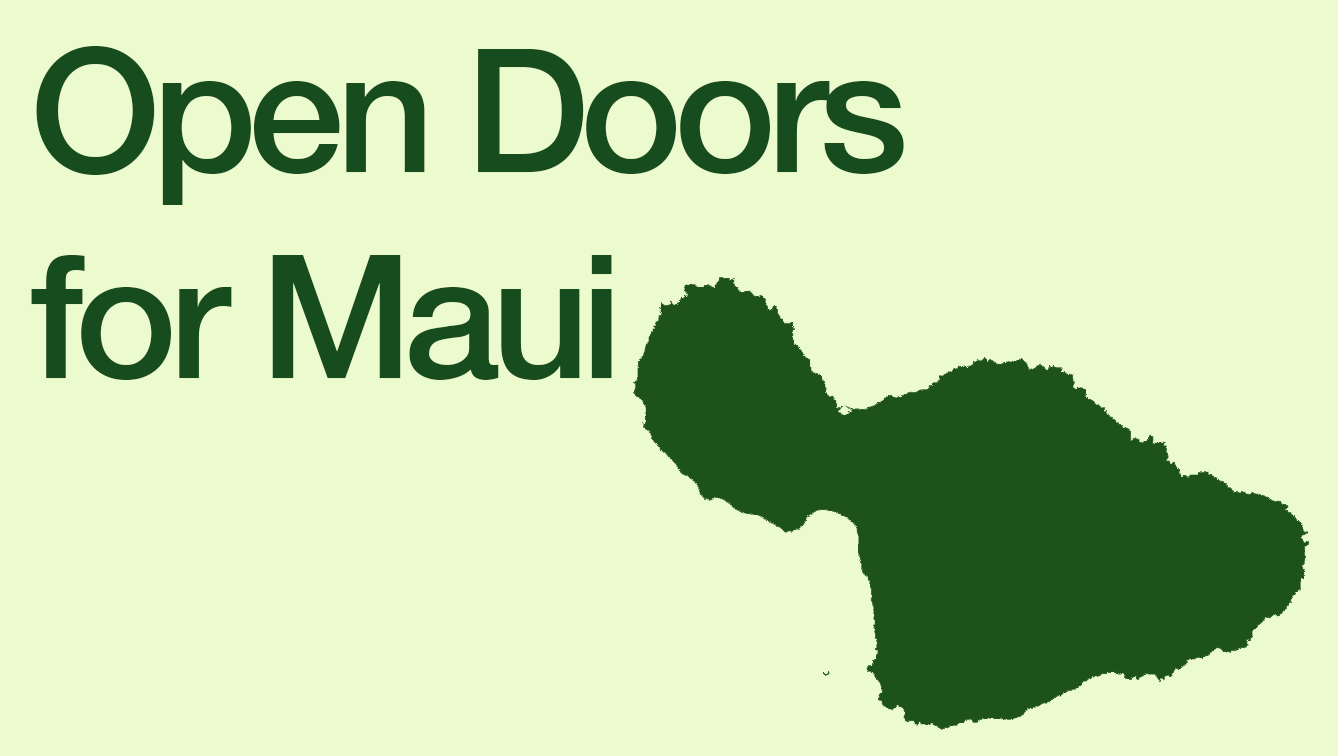
<style>
.page{position:relative;width:1338px;height:756px;background:#ecfbcd}
.page>*{position:absolute;margin:0}
.t1{font:172px "HelveticaNeue-Medium";letter-spacing:-0.05em;color:#174d1e}
</style>
<div class="page">
<p class="t1" style="left:31px;top:46px;width:873px;height:334px">Open Doors<br>for Maui</p>
</div>
